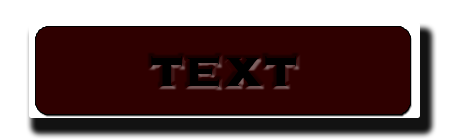
<style>
.page{position:relative;width:450px;height:140px;background:#2f0000}
.page>*{position:absolute;margin:0}
.t1{font:64px "Copperplate-Bold";color:#000000}
</style>
<div class="page">
<p class="t1" style="left:151px;top:56px;width:146px;height:31px">text</p>
</div>
